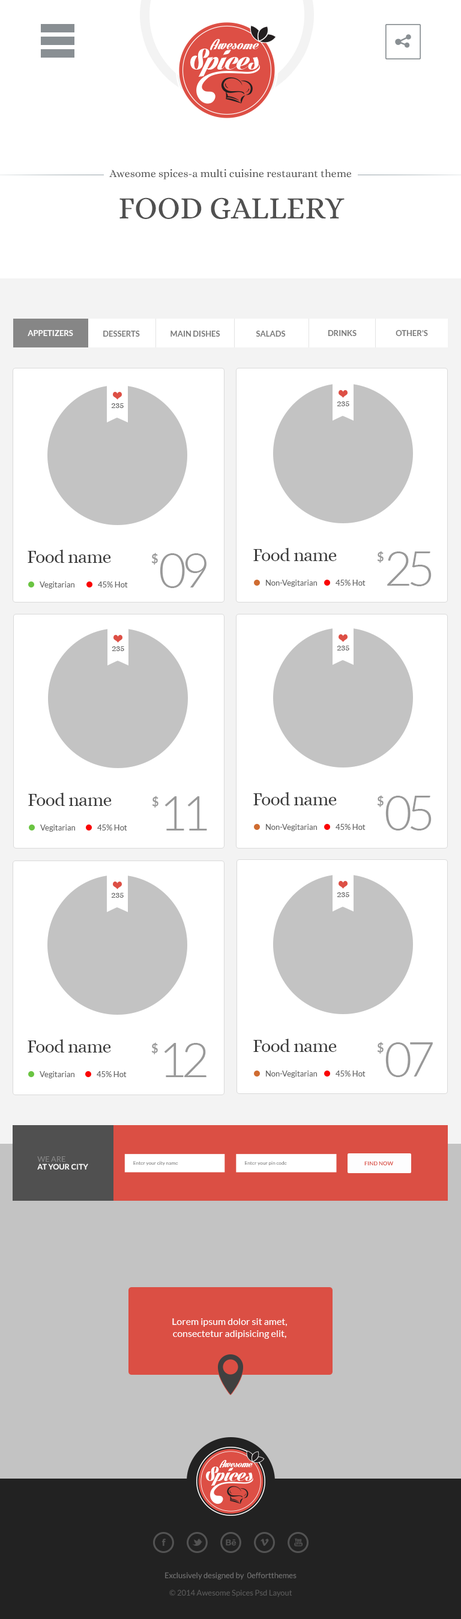
<style>
.page{position:relative;width:461px;height:1619px;background:#ffffff}
.page>*{position:absolute;margin:0}
.t1{font:10.8px "Alice-Regular";color:#505050}
.t2{font:31.4px "Alice-Regular";color:#505050;text-transform:uppercase}
.t3{font:7.8px "Lato-Bold";color:#ffffff;text-transform:uppercase}
.t4{font:7.8px "Lato-Bold";color:#7a7a7a;text-transform:uppercase}
.t5{font:9px "Alice-Regular";letter-spacing:-0.025em;color:#666666}
.t6{font:18px "Alice-Regular";letter-spacing:-0.025em;color:#3a3a3a}
.t7{font:12px "Lato-Bold";letter-spacing:-0.1em;color:#999999}
.t8{font:48px "Lato-Light";letter-spacing:-0.1em;color:#999999}
.t9{font:7.8px "Lato-Regular";color:#666666}
.t10{font:7.6px/7.6px "Lato-Bold";color:#ffffff;text-transform:uppercase}
.t11{font:7.6px/7.6px "Lato-Regular";color:#888888;text-transform:uppercase}
.t12{font:4.9px "Lato-Regular";color:#888888}
.t13{font:5.6px "Lato-Bold";color:#db4f44;text-transform:uppercase}
.t14{font:9.6px/12px "Lato-Regular";color:#ffffff}
.t15{font:7.8px "Lato-Regular";color:#737373}
.t16{font:7.8px "Lato-Regular";color:#5a5a5a}
</style>
<div class="page">
<p class="t1" style="left:109px;top:169px;width:243px;height:10px">Awesome spices-a multi cuisine restaurant theme</p>
<p class="t2" style="left:119px;top:197px;width:225px;height:22px">food gallery</p>
<p class="t3" style="left:28px;top:330px;width:45px;height:6px">Appetizers</p>
<p class="t4" style="left:103px;top:331px;width:37px;height:6px">Desserts</p>
<p class="t4" style="left:170px;top:331px;width:50px;height:6px">Main Dishes</p>
<p class="t4" style="left:256px;top:331px;width:30px;height:6px">Salads</p>
<p class="t4" style="left:328px;top:330px;width:28px;height:6px">Drinks</p>
<p class="t4" style="left:395px;top:330px;width:33px;height:6px">other’s</p>
<p class="t5" style="left:337px;top:401px;width:12px;height:5px">235</p>
<p class="t5" style="left:111px;top:403px;width:13px;height:5px">235</p>
<p class="t6" style="left:28px;top:550px;width:83px;height:13px">Food name</p>
<p class="t7" style="left:151px;top:553px;width:7px;height:12px">$</p>
<p class="t8" style="left:160px;top:553px;width:46px;height:35px">09</p>
<p class="t6" style="left:253px;top:548px;width:84px;height:13px">Food name</p>
<p class="t7" style="left:377px;top:551px;width:6px;height:12px">$</p>
<p class="t8" style="left:387px;top:551px;width:44px;height:35px">25</p>
<p class="t9" style="left:40px;top:581px;width:34px;height:8px">Vegitarian</p>
<p class="t9" style="left:98px;top:581px;width:30px;height:6px">45% Hot</p>
<p class="t9" style="left:266px;top:580px;width:51px;height:7px">Non-Vegitarian</p>
<p class="t9" style="left:335px;top:580px;width:30px;height:6px">45% Hot</p>
<p class="t5" style="left:112px;top:646px;width:12px;height:5px">235</p>
<p class="t5" style="left:337px;top:646px;width:12px;height:4px">235</p>
<p class="t6" style="left:28px;top:793px;width:84px;height:13px">Food name</p>
<p class="t7" style="left:152px;top:796px;width:6px;height:12px">$</p>
<p class="t8" style="left:164px;top:796px;width:43px;height:34px">11</p>
<p class="t6" style="left:253px;top:792px;width:84px;height:13px">Food name</p>
<p class="t7" style="left:377px;top:795px;width:6px;height:12px">$</p>
<p class="t8" style="left:385px;top:796px;width:46px;height:34px">05</p>
<p class="t9" style="left:40px;top:824px;width:35px;height:8px">Vegitarian</p>
<p class="t9" style="left:97px;top:824px;width:30px;height:6px">45% Hot</p>
<p class="t9" style="left:266px;top:824px;width:51px;height:7px">Non-Vegitarian</p>
<p class="t9" style="left:335px;top:824px;width:30px;height:6px">45% Hot</p>
<p class="t5" style="left:111px;top:893px;width:13px;height:5px">235</p>
<p class="t5" style="left:337px;top:892px;width:12px;height:5px">235</p>
<p class="t6" style="left:28px;top:1039px;width:83px;height:13px">Food name</p>
<p class="t7" style="left:151px;top:1042px;width:7px;height:12px">$</p>
<p class="t8" style="left:164px;top:1043px;width:42px;height:34px">12</p>
<p class="t6" style="left:253px;top:1039px;width:84px;height:13px">Food name</p>
<p class="t7" style="left:377px;top:1042px;width:6px;height:12px">$</p>
<p class="t8" style="left:385px;top:1042px;width:48px;height:35px">07</p>
<p class="t9" style="left:40px;top:1071px;width:34px;height:7px">Vegitarian</p>
<p class="t9" style="left:97px;top:1071px;width:30px;height:6px">45% Hot</p>
<p class="t9" style="left:266px;top:1070px;width:51px;height:8px">Non-Vegitarian</p>
<p class="t9" style="left:335px;top:1070px;width:30px;height:6px">45% Hot</p>
<p class="t10" style="left:37px;top:1156px;width:51px;height:13px"><span class="t11">we are<br></span>at your city</p>
<p class="t12" style="left:133px;top:1161px;width:45px;height:4px">Enter your city name</p>
<p class="t12" style="left:245px;top:1161px;width:42px;height:4px">Enter your pin code</p>
<p class="t13" style="left:364px;top:1161px;width:29px;height:4px">find Now</p>
<p class="t14" style="left:172px;top:1318px;width:115px;height:21px;text-align:center">Lorem ipsum dolor sit amet, consectetur adipisicing elit,</p>
<p class="t15" style="left:165px;top:1572px;width:131px;height:8px">Exclusively designed by  0effortthemes</p>
<p class="t16" style="left:169px;top:1589px;width:123px;height:8px">© 2014 Awesome Spices Psd Layout</p>
</div>
